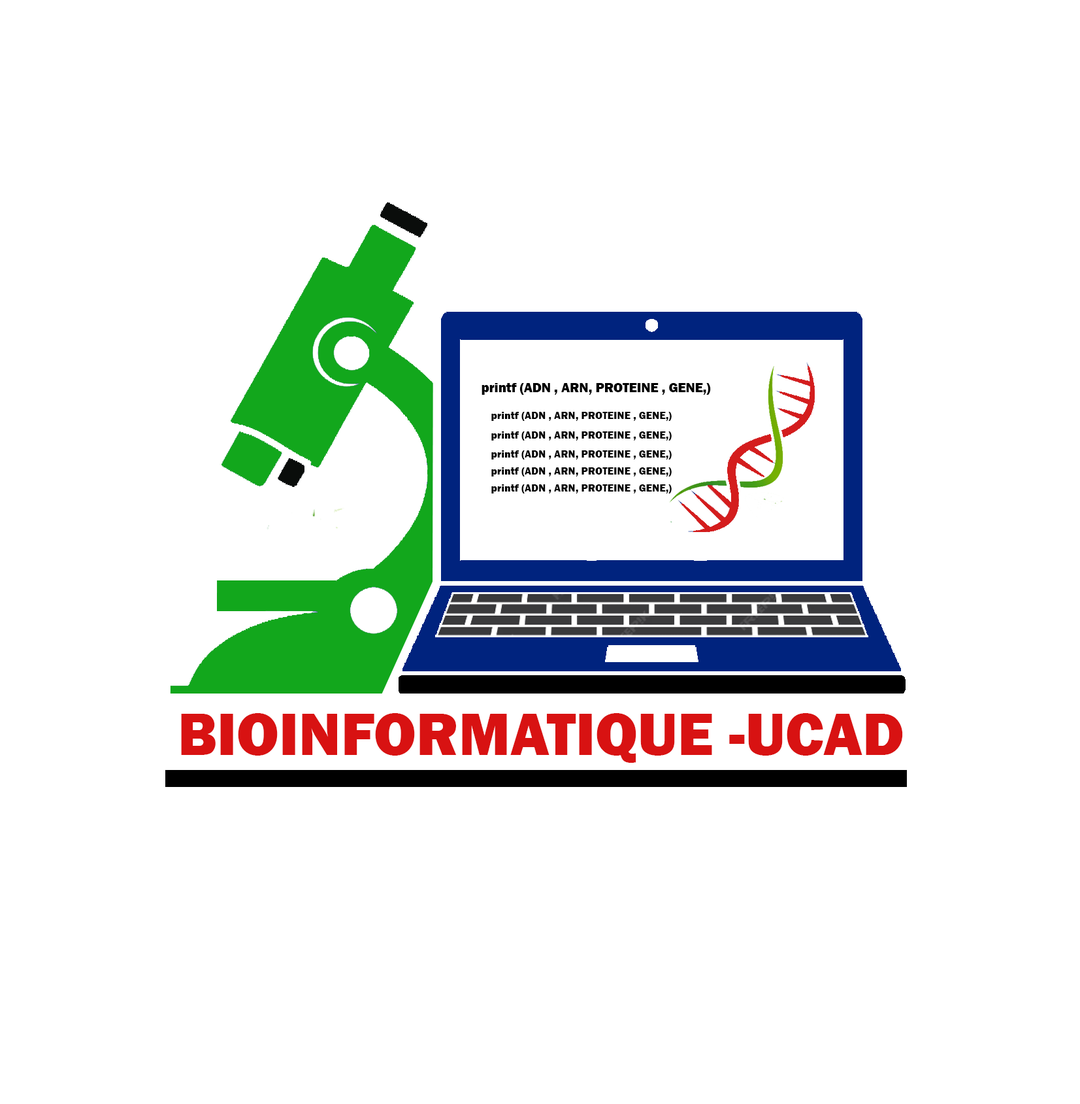
<style>
.page{position:relative;width:1080px;height:1104px;background:#ffffff}
.page>*{position:absolute;margin:0}
.t1{font:13.5px "FranklinGothic-Heavy";color:#000000}
.t2{font:10.6px "FranklinGothic-Heavy";color:#000000}
.t3{font:61.3px "FranklinGothic-Heavy";color:#d81212}
</style>
<div class="page">
<p class="t1" style="left:482px;top:383px;width:229px;height:12px">printf (ADN , ARN, PROTEINE , GENE,)</p>
<p class="t2" style="left:491px;top:412px;width:181px;height:9px">printf (ADN , ARN, PROTEINE , GENE,)</p>
<p class="t2" style="left:491px;top:431px;width:181px;height:9px">printf (ADN , ARN, PROTEINE , GENE,)</p>
<p class="t2" style="left:491px;top:450px;width:181px;height:9px">printf (ADN , ARN, PROTEINE , GENE,)</p>
<p class="t2" style="left:491px;top:467px;width:181px;height:9px">printf (ADN , ARN, PROTEINE , GENE,)</p>
<p class="t2" style="left:491px;top:484px;width:181px;height:9px">printf (ADN , ARN, PROTEINE , GENE,)</p>
<p class="t3" style="left:181px;top:713px;width:722px;height:50px">BIOINFORMATIQUE -UCAD</p>
</div>
